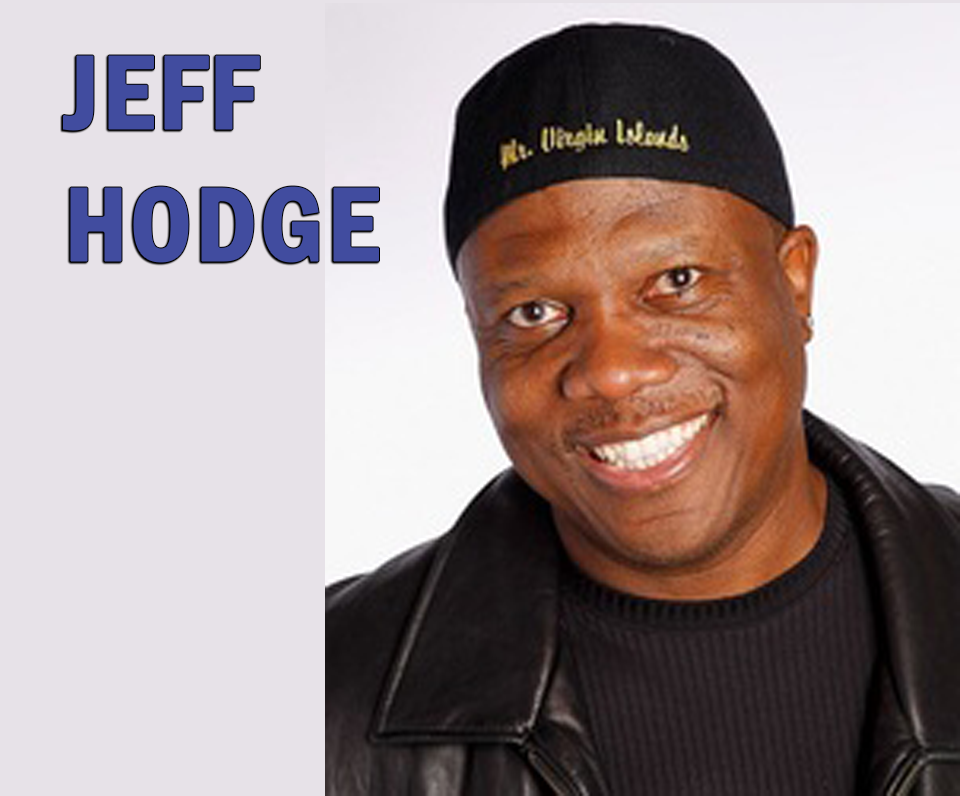
<style>
.page{position:relative;width:960px;height:796px;background:#e7e2e8}
.page>*{position:absolute;margin:0}
.t1{font:110px "FranklinGothic-DemiCnd";color:#414c9f;font-weight:bold}
</style>
<div class="page">
<p class="t1" style="left:62px;top:54px;width:318px;height:210px">JEFF <br>HODGE</p>
</div>
